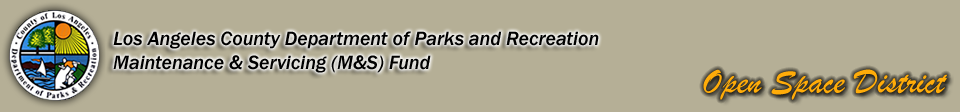
<style>
.page{position:relative;width:960px;height:112px;background:#b5af96}
.page>*{position:absolute;margin:0}
.t1{font:20px "FranklinGothic-MediumItalic";color:#000000}
</style>
<div class="page">
<p class="t1" style="left:113px;top:31px;width:486px;height:42px">Los Angeles County Department of Parks and Recreation <br>Maintenance &amp; Servicing (M&amp;S) Fund</p>
</div>
